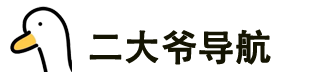
<style>
.page{position:relative;width:309px;height:80px;background:#ffffff}
.page>*{position:absolute;margin:0}
.t1{font:36px "AdobeHeitiStd-Regular";color:#141402;font-weight:bold}
</style>
<div class="page">
<p class="t1" style="left:89px;top:29px;width:182px;height:36px">二大爷导航</p>
</div>
